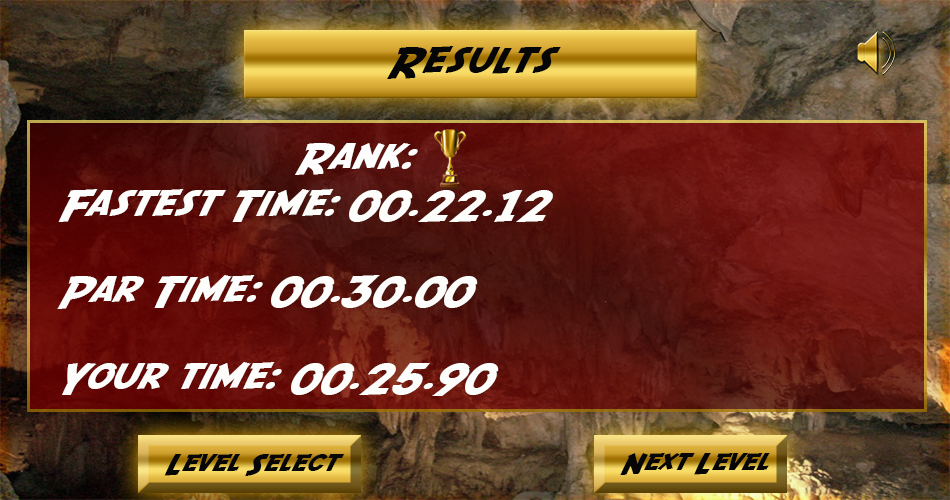
<style>
.page{position:relative;width:950px;height:500px}
.page>*{position:absolute;margin:0}
.t1{font:36px "SFFedora";letter-spacing:-0.005em;color:#060606;scale:1.2 1}
.t2{font:36px "SFFedora";letter-spacing:-0.005em;color:#fefefe;scale:1.2 1}
.t3{font:36px "SFFedora";letter-spacing:-0.005em;color:#fdfdfb;scale:1.2 1}
.t4{font:24px "SFFedora";letter-spacing:-0.005em;color:#060606;scale:1.2 1}
</style>
<div class="page">
<p class="t1" style="left:387px;top:46px;width:174px;height:33px">Results</p>
<p class="t2" style="left:295px;top:143px;width:123px;height:32px">Rank:</p>
<p class="t3" style="left:57px;top:189px;width:496px;height:207px">Fastest Time: 00.22.12<br><br>Par Time: 00.30.00<br><br>Your time: 00.25.90</p>
<p class="t4" style="left:164px;top:454px;width:181px;height:22px">Level Select</p>
<p class="t4" style="left:620px;top:453px;width:150px;height:22px">Next Level</p>
</div>
